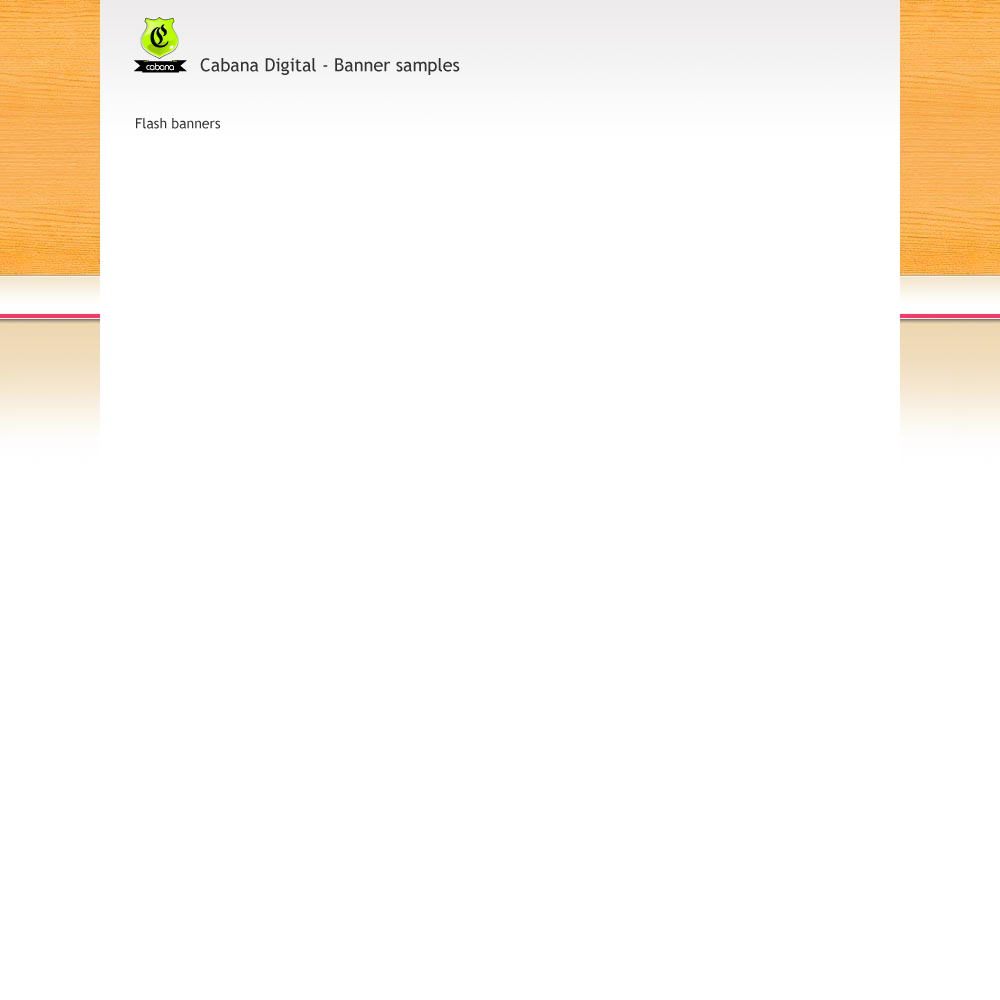
<style>
.page{position:relative;width:1000px;height:1000px;background:#ffffff}
.page>*{position:absolute;margin:0}
.t1{font:18px "TrebuchetMS";color:#333333}
.t2{font:14px "TrebuchetMS";color:#333333}
</style>
<div class="page">
<p class="t1" style="left:200px;top:58px;width:260px;height:17px">Cabana Digital - Banner samples</p>
<p class="t2" style="left:136px;top:118px;width:84px;height:11px">Flash banners</p>
</div>
